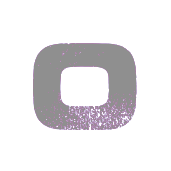
<style>
.page{position:relative;width:171px;height:171px;background:#ffffff}
.page>*{position:absolute;margin:0}
.t1{font:121px "Coalition";color:#8f8f8f}
</style>
<div class="page">
<p class="t1" style="left:33px;top:43px;width:104px;height:87px">0</p>
<p class="t1" style="left:33px;top:43px;width:104px;height:87px">0</p>
<p class="t1" style="left:33px;top:43px;width:104px;height:87px">0</p>
</div>
